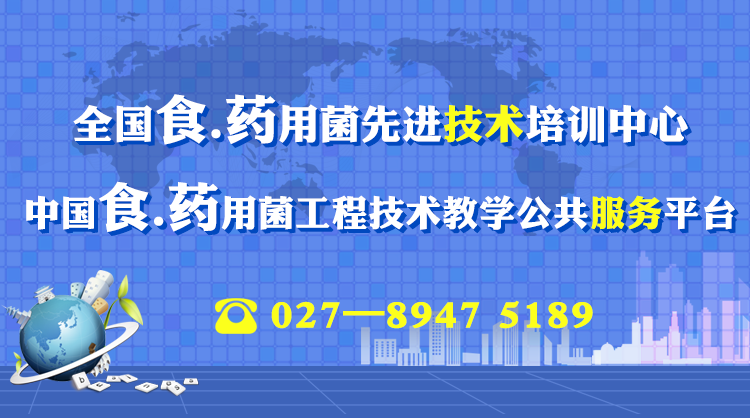
<style>
.page{position:relative;width:750px;height:418px;background:#5f8aec}
.page>*{position:absolute;margin:0}
.t1{font:39.9px "DFPLiJinHeiW8";color:#ffffff;font-weight:bold}
.t2{font:52px "DFPLiJinHeiW8";color:#ffffff;font-weight:bold}
.t3{font:39.9px "DFPLiJinHeiW8";color:#fcff1c;font-weight:bold}
.t4{font:39.9px "DFPLiJinHeiW8";font-weight:bold}
.t5{font:52px "DFPLiJinHeiW8";font-weight:bold}
.t6{font:35.8px "DFPLiJinHeiW8";color:#ffffff;font-weight:bold}
.t7{font:35.8px "DFPLiJinHeiW8";color:#fcff1c;font-weight:bold}
.t8{font:35.8px "DFPLiJinHeiW8";font-weight:bold}
.t9{font:41px "DFPLiJinHeiW8";color:#fcff1c;font-weight:bold}
</style>
<div class="page">
<p class="t1" style="left:73px;top:94px;width:615px;height:51px">全国<span class="t2">食.药</span>用菌先进<span class="t3">技术</span>培训中心</p>
<p class="t1" style="left:74px;top:95px;width:615px;height:51px">全国<span class="t2">食.药</span>用菌先进技术培训中心</p>
<p class="t4" style="left:75px;top:96px;width:615px;height:51px">全国<span class="t5">食.药</span>用菌先进技术培训中心</p>
<p class="t6" style="left:26px;top:181px;width:709px;height:51px">中国<span class="t2">食.药</span>用菌工程技术教学公共<span class="t7">服务</span>平台</p>
<p class="t6" style="left:27px;top:182px;width:709px;height:51px">中国<span class="t2">食.药</span>用菌工程技术教学公共服务平台</p>
<p class="t8" style="left:28px;top:183px;width:709px;height:51px">中国<span class="t5">食.药</span>用菌工程技术教学公共服务平台</p>
<p class="t9" style="left:271px;top:300px;width:322px;height:29px">027—8947 5189</p>
</div>
